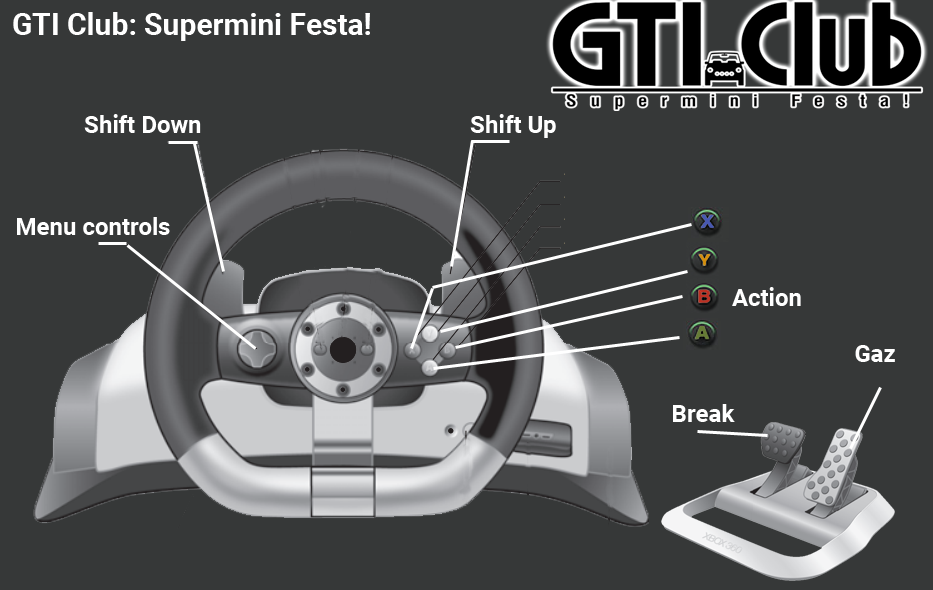
<style>
.page{position:relative;width:933px;height:590px;background:#363838}
.page>*{position:absolute;margin:0}
.t1{font:30px "Roboto-Bold";color:#ffffff}
.t2{font:24px "Roboto-Bold";color:#ffffff}
</style>
<div class="page">
<p class="t1" style="left:13px;top:12px;width:357px;height:29px">GTI Club: Supermini Festa!</p>
<p class="t2" style="left:84px;top:114px;width:117px;height:19px">Shift Down</p>
<p class="t2" style="left:470px;top:114px;width:86px;height:24px">Shift Up</p>
<p class="t2" style="left:17px;top:217px;width:153px;height:18px">Menu controls</p>
<p class="t2" style="left:732px;top:287px;width:69px;height:19px">Action</p>
<p class="t2" style="left:855px;top:345px;width:40px;height:17px">Gaz</p>
<p class="t2" style="left:673px;top:404px;width:62px;height:18px">Break</p>
</div>
